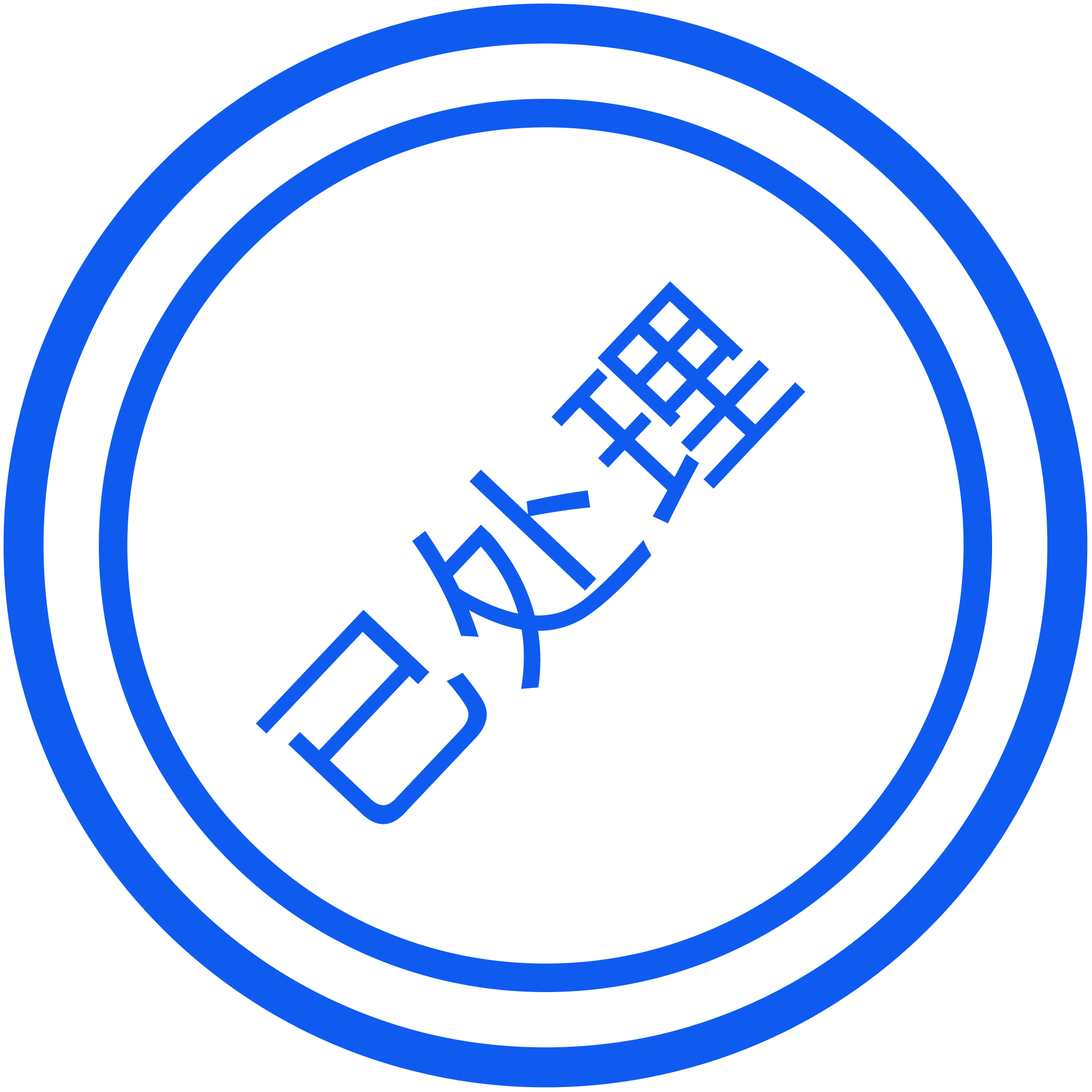
<style>
.page{position:relative;width:1092px;height:1092px;background:#ffffff}
.page>*{position:absolute;margin:0}
.t1{font:341.2px "MicrosoftYaHei";letter-spacing:0.1em;color:#0f5bf0;text-transform:uppercase}
</style>
<div class="page">
<p class="t1" style="left:256px;top:281px;width:549px;height:543px;rotate:-47deg">已处理</p>
</div>
